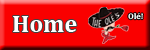
<style>
.page{position:relative;width:150px;height:50px;background:#fa0000}
.page>*{position:absolute;margin:0}
.t1{font:24px "Cambria-Bold";color:#ffffff}
.t2{font:8.3px "Cambria-Bold";color:#ffffff}
</style>
<div class="page">
<p class="t1" style="left:13px;top:16px;width:64px;height:16px">Home</p>
<p class="t2" style="left:128px;top:12px;width:15px;height:8px">Olé!</p>
</div>
